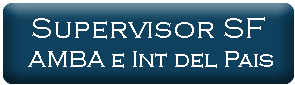
<style>
.page{position:relative;width:295px;height:85px;background:#0e415e}
.page>*{position:absolute;margin:0}
.t1{font:24px "CopperplateGothic-Light";color:#ffffff}
.t2{font:30px "CopperplateGothic-Light";color:#ffffff}
.t3{font:24px "CopperplateGothic-Light"}
.t4{font:30px "CopperplateGothic-Light"}
</style>
<div class="page">
<p class="t1" style="left:28px;top:17px;width:245px;height:51px;text-align:center"><span class="t2">Supervisor SF<br> </span>AMBA e Int del Pais</p>
<p class="t3" style="left:17px;top:18px;width:264px;height:50px;text-align:center"><span class="t4">Supervisor SOC<br> </span>AMBA e Int del Pais</p>
</div>
